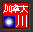
<style>
.page{position:relative;width:33px;height:32px;background:#f20000}
.page>*{position:absolute;margin:0}
.t1{font:10.4px "SimSun";letter-spacing:-0.25em;color:#ffffff}
.t2{font:11.7px "SimSun";color:#ffffff}
</style>
<div class="page">
<p class="t1" style="left:3px;top:4px;width:25px;height:9px">加拿大</p>
<p class="t2" style="left:16px;top:15px;width:11px;height:12px">川</p>
</div>
